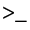
<style>
.page{position:relative;width:30px;height:30px;background:#ffffff}
.page>*{position:absolute;margin:0}
.t1{font:22.9px "MyriadPro-Regular";color:#000000}
</style>
<div class="page">
<p class="t1" style="left:3px;top:6px;width:24px;height:16px">&gt;_</p>
</div>
